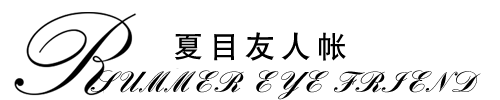
<style>
.page{position:relative;width:500px;height:100px;background:#ffffff}
.page>*{position:absolute;margin:0}
.t1{font:30px "HeitiCSEG-Medium-GB";letter-spacing:0.2em;color:#000000;text-transform:uppercase}
.t2{font:30px "309-CAI978";letter-spacing:0.03em;color:#000000;text-transform:uppercase}
</style>
<div class="page">
<p class="t1" style="left:175px;top:32px;width:171px;height:29px">夏目友人帐</p>
<p class="t2" style="left:90px;top:70px;width:391px;height:30px">Summer eye friend</p>
</div>
